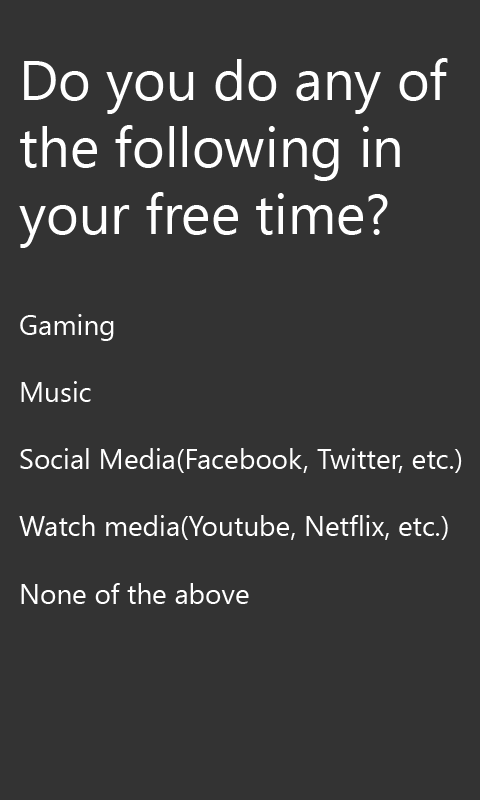
<style>
.page{position:relative;width:480px;height:800px;background:#333333}
.page>*{position:absolute;margin:0}
.t1{font:28px "SegoeUIHistoric";color:#ffffff}
.t2{font:56px "SegoeUIHistoric";color:#ffffff}
</style>
<div class="page">
<p class="t1" style="left:19px;top:58px;width:443px;height:546px"><span class="t2">Do you do any of <br>the following in <br>your free time?<br></span><br><br>Gaming<br><br>Music<br><br>Social Media(Facebook, Twitter, etc.)<br><br>Watch media(Youtube, Netflix, etc.)<br><br>None of the above</p>
</div>
